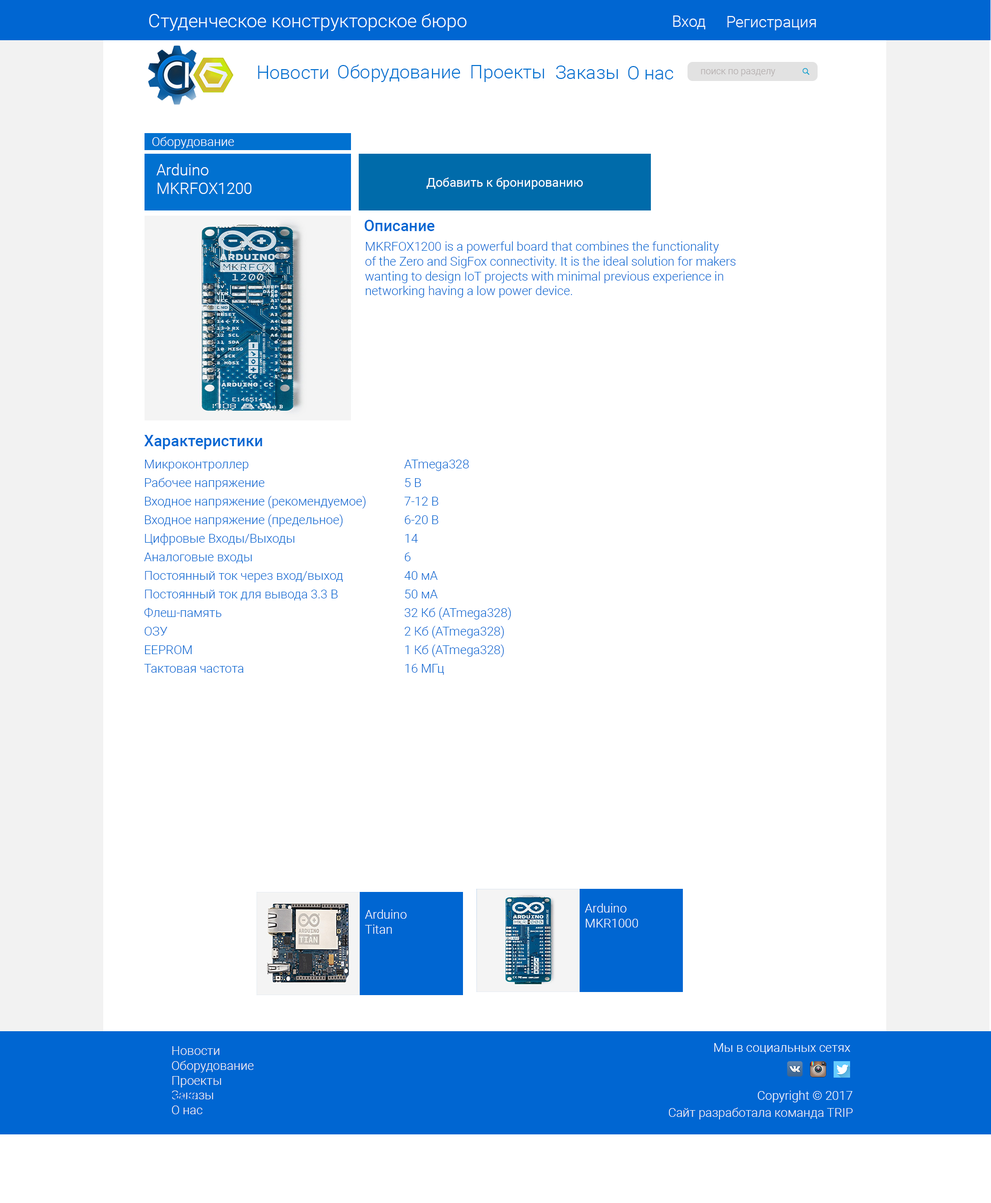
<style>
.page{position:relative;width:991px;height:1203px;background:#ffffff}
.page>*{position:absolute;margin:0}
.t1{font:18.6px "Roboto-Light";color:#f8fdff}
.t2{font:15.5px "Roboto-Light";color:#f8fdff}
.t3{font:18.6px "Roboto-Light";color:#0171d0}
.t4{font:9.3px "Roboto-Light";color:#b3adad}
.t5{font:12.4px "Roboto-Light";color:#ffffff}
.t6{font:15.5px "Roboto-Light";color:#ffffff}
.t7{font:12.4px "Roboto-Regular";color:#ffffff}
.t8{font:15.5px "Roboto-Medium";color:#0066d2}
.t9{font:12.4px "Roboto-Light";color:#0066d2}
.t10{font:12.4px/18.6px "Roboto-Light";color:#0066d2}
.t11{font:12.4px "Roboto-Light";color:#f8f3f3}
.t12{font:12.4px "Roboto-Light";color:#f8fdff}
</style>
<div class="page">
<p class="t1" style="left:149px;top:13px;width:318px;height:18px">Студенческое конструкторское бюро</p>
<p class="t2" style="left:673px;top:15px;width:32px;height:14px">Вход</p>
<p class="t2" style="left:727px;top:16px;width:89px;height:14px">Регистрация</p>
<p class="t3" style="left:258px;top:66px;width:70px;height:13px">Новости</p>
<p class="t3" style="left:338px;top:65px;width:122px;height:17px">Оборудование</p>
<p class="t3" style="left:471px;top:65px;width:73px;height:17px">Проекты</p>
<p class="t3" style="left:556px;top:66px;width:62px;height:13px">Заказы</p>
<p class="t3" style="left:628px;top:66px;width:45px;height:13px">О нас</p>
<p class="t4" style="left:701px;top:69px;width:74px;height:7px">поиск по разделу</p>
<p class="t5" style="left:152px;top:137px;width:82px;height:12px">Оборудование</p>
<p class="t6" style="left:156px;top:164px;width:95px;height:30px">Arduino MKRFOX1200</p>
<p class="t7" style="left:426px;top:178px;width:157px;height:11px">Добавить к бронированию</p>
<p class="t8" style="left:364px;top:220px;width:71px;height:11px">Описание</p>
<p class="t9" style="left:365px;top:242px;width:370px;height:56px">MKRFOX1200 is a powerful board that combines the functionality <br>of the Zero and SigFox connectivity. It is the ideal solution for makers<br>wanting to design IoT projects with minimal previous experience in<br>networking having a low power device.</p>
<p class="t8" style="left:144px;top:435px;width:118px;height:14px">Характеристики</p>
<p class="t10" style="left:144px;top:460px;width:367px;height:215px">Микроконтроллер         ATmega328<br>Рабочее напряжение           5 В<br>Входное напряжение (рекомендуемое)   7-12 В<br>Входное напряжение (предельное)    6-20 В<br>Цифровые Входы/Выходы      14 <br>Аналоговые входы         6<br>Постоянный ток через вход/выход    40 мА<br>Постоянный ток для вывода 3.3 В    50 мА<br>Флеш-память                                                        32 Кб (ATmega328) <br>ОЗУ                                                                          2 Кб (ATmega328)<br>EEPROM            1 Кб (ATmega328)<br>Тактовая частота         16 МГц</p>
<p class="t5" style="left:585px;top:904px;width:53px;height:24px">Arduino <br>MKR1000</p>
<p class="t5" style="left:365px;top:910px;width:42px;height:24px">Arduino <br>Titan</p>
<p class="t11" style="left:172px;top:1047px;width:82px;height:68px">Новости<br>Оборудование<br>Проекты<br>Заказы<br>О нас</p>
<p class="t12" style="left:714px;top:1043px;width:136px;height:11px">Мы в социальных сетях</p>
<p class="t12" style="left:758px;top:1091px;width:95px;height:12px">Copyright © 2017</p>
<p class="t11" style="left:668px;top:1108px;width:185px;height:12px">Сайт разработала команда TRIP</p>
</div>
